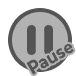
<style>
.page{position:relative;width:76px;height:76px;background:#ffffff}
.page>*{position:absolute;margin:0}
.t1{font:18.8px "MikadoMedium";color:#535453}
</style>
<div class="page">
<p class="t1" style="left:26px;top:44px;width:48px;height:31px;rotate:-30deg">Pause</p>
</div>
